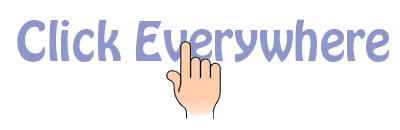
<style>
.page{position:relative;width:400px;height:130px;background:#ffffff}
.page>*{position:absolute;margin:0}
.t1{font:48px "HoboStd";color:#8c97cb}
</style>
<div class="page">
<p class="t1" style="left:17px;top:19px;width:372px;height:43px">Click Everywhere</p>
</div>
